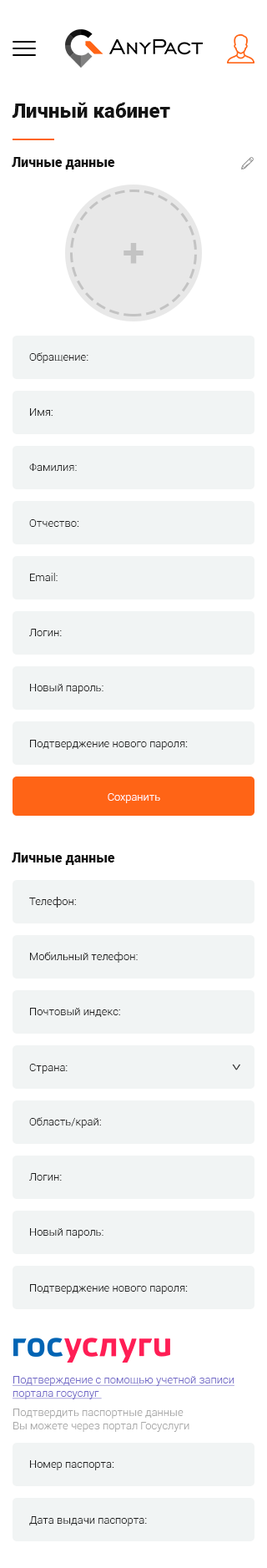
<style>
.page{position:relative;width:267px;height:1568px;background:#ffffff}
.page>*{position:absolute;margin:0}
.t1{font:20px "Roboto-Black";color:#141414}
.t2{font:13.4px "Roboto-Black";color:#141414}
.t3{font:40.1px "Roboto-Bold";color:#c3c3c3}
.t4{font:10.9px "Roboto-Light";color:#1d1d1d}
.t5{font:10.9px "Roboto-Light";color:#ffffff}
.t6{font:19.3px "Roboto-Light";scale:0.67 1}
.t7{font:10.9px "Roboto-Light";color:#7067c7;text-decoration:underline}
.t8{font:10.9px "Roboto-Light";color:#a8a8a8}
</style>
<div class="page">
<p class="t1" style="left:12px;top:102px;width:158px;height:16px">Личный кабинет</p>
<p class="t2" style="left:12px;top:157px;width:103px;height:12px">Личные данные</p>
<p class="t3" style="left:124px;top:243px;width:20px;height:21px">+</p>
<p class="t4" style="left:29px;top:352px;width:60px;height:11px">Обращение:</p>
<p class="t4" style="left:30px;top:408px;width:23px;height:8px">Имя:</p>
<p class="t4" style="left:29px;top:463px;width:48px;height:8px">Фамилия:</p>
<p class="t4" style="left:29px;top:519px;width:50px;height:8px">Отчество:</p>
<p class="t4" style="left:30px;top:573px;width:28px;height:8px">Email:</p>
<p class="t4" style="left:29px;top:629px;width:33px;height:7px">Логин:</p>
<p class="t4" style="left:30px;top:684px;width:74px;height:10px">Новый пароль:</p>
<p class="t4" style="left:30px;top:740px;width:158px;height:10px">Подтверджение нового пароля:</p>
<p class="t5" style="left:108px;top:793px;width:52px;height:10px">Сохранить</p>
<p class="t2" style="left:12px;top:852px;width:103px;height:13px">Личные данные</p>
<p class="t4" style="left:29px;top:897px;width:47px;height:11px">Телефон:</p>
<p class="t4" style="left:30px;top:952px;width:108px;height:11px">Мобильный телефон:</p>
<p class="t4" style="left:30px;top:1008px;width:90px;height:9px">Почтовый индекс:</p>
<p class="t4" style="left:29px;top:1064px;width:39px;height:10px">Страна:</p>
<p class="t6" style="left:232px;top:1064px;width:8px;height:6px;rotate:90deg">&gt;</p>
<p class="t4" style="left:29px;top:1117px;width:72px;height:11px">Область/край:</p>
<p class="t4" style="left:29px;top:1173px;width:33px;height:8px">Логин:</p>
<p class="t4" style="left:30px;top:1228px;width:74px;height:10px">Новый пароль:</p>
<p class="t4" style="left:30px;top:1284px;width:158px;height:10px">Подтверджение нового пароля:</p>
<p class="t7" style="left:13px;top:1376px;width:222px;height:23px">Подтверждение с помощью учетной записи<br>портала госуслуг</p>
<p class="t8" style="left:13px;top:1409px;width:177px;height:23px">Подтвердить паспортные данные<br>Вы можете через портал Госуслуги</p>
<p class="t4" style="left:30px;top:1460px;width:84px;height:10px">Номер паспорта:</p>
<p class="t4" style="left:29px;top:1516px;width:118px;height:10px">Дата выдачи паспорта:</p>
</div>
